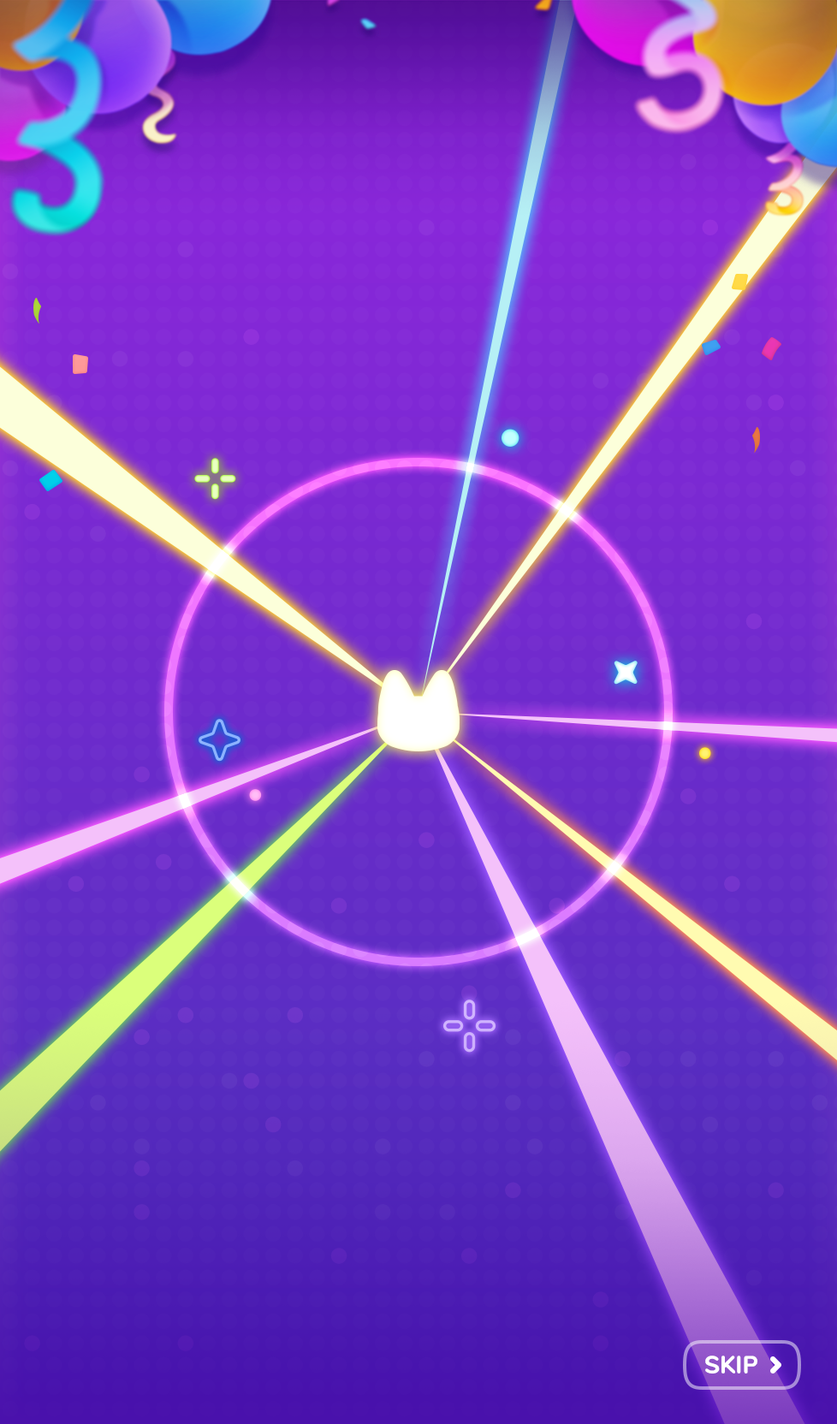
<style>
.page{position:relative;width:837px;height:1424px}
.page>*{position:absolute;margin:0}
.t1{font:25.5px "SNPro-SemiBold";letter-spacing:-0.01em;color:#ffffff;text-transform:uppercase}
</style>
<div class="page">
<p class="t1" style="left:705px;top:1356px;width:53px;height:18px">Skip</p>
</div>
